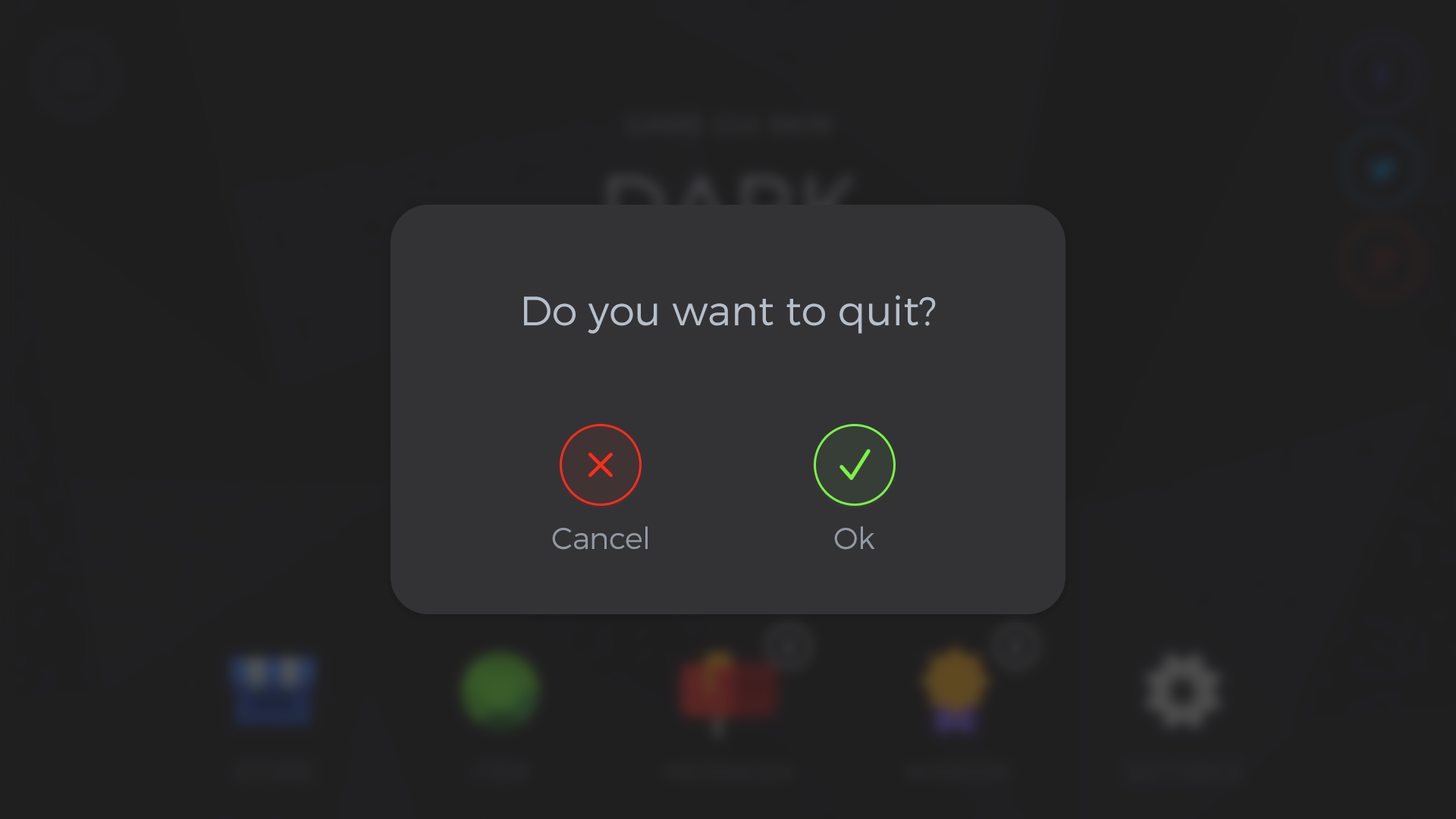
<style>
.page{position:relative;width:1456px;height:819px;background:#201f20}
.page>*{position:absolute;margin:0}
.t1{font:40.9px "Montserrat-Light";color:#b6bfc9}
.t2{font:30.3px "Montserrat-Light";color:#9399a3}
</style>
<div class="page">
<p class="t1" style="left:524px;top:295px;width:412px;height:39px">Do you want to quit?</p>
<p class="t2" style="left:552px;top:526px;width:96px;height:24px">Cancel</p>
<p class="t2" style="left:834px;top:526px;width:41px;height:24px">Ok</p>
</div>
